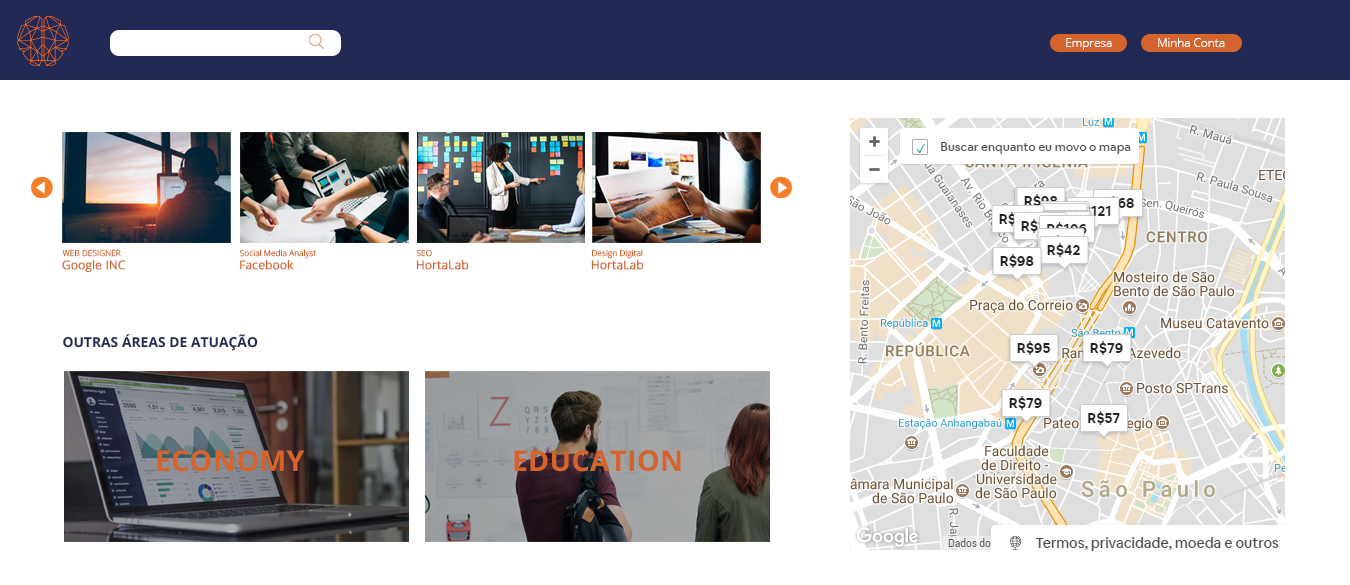
<style>
.page{position:relative;width:1350px;height:585px;background:#ffffff}
.page>*{position:absolute;margin:0}
.t1{font:11.6px "OpenSans-Light";letter-spacing:0.01em;color:#ffffff}
.t2{font:8.2px "OpenSans-Light";letter-spacing:0.01em;color:#d3642b}
.t3{font:11.8px "OpenSans-Light";letter-spacing:0.01em;color:#d3642b;font-weight:bold}
.t4{font:13.6px "OpenSans-Bold";letter-spacing:0.01em;color:#232955;text-transform:uppercase}
.t5{font:28.6px "OpenSans-Bold";letter-spacing:0.01em;color:#d4642b;text-transform:uppercase}
</style>
<div class="page">
<p class="t1" style="left:1066px;top:38px;width:46px;height:12px">Empresa</p>
<p class="t1" style="left:1158px;top:38px;width:67px;height:9px">Minha Conta</p>
<p class="t2" style="left:62px;top:249px;width:59px;height:8px">WEB DESIGNER</p>
<p class="t2" style="left:240px;top:249px;width:76px;height:10px">Social Media Analyst</p>
<p class="t2" style="left:416px;top:249px;width:16px;height:8px">SEO</p>
<p class="t2" style="left:592px;top:249px;width:51px;height:10px">Design Digital</p>
<p class="t3" style="left:62px;top:259px;width:64px;height:14px">Google INC</p>
<p class="t3" style="left:240px;top:259px;width:54px;height:11px">Facebook</p>
<p class="t3" style="left:416px;top:259px;width:53px;height:11px">HortaLab</p>
<p class="t3" style="left:591px;top:259px;width:53px;height:11px">HortaLab</p>
<p class="t4" style="left:63px;top:334px;width:195px;height:17px">Outras áreas de atuação</p>
<p class="t5" style="left:157px;top:450px;width:148px;height:22px">ECONOMY</p>
<p class="t5" style="left:514px;top:450px;width:167px;height:22px">EDUCATION</p>
</div>
